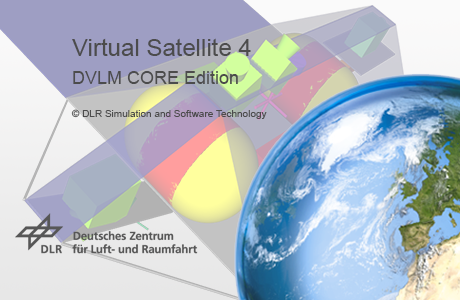
<style>
.page{position:relative;width:460px;height:300px}
.page>*{position:absolute;margin:0}
.t1{font:10px/12.5px "ArialMT";color:#4c4c4c}
.t2{font:24px/19.2px "ArialMT";color:#4c4c4c}
.t3{font:18px/19.2px "ArialMT";color:#4c4c4c}
</style>
<div class="page">
<p class="t1" style="left:71px;top:38px;width:196px;height:81px"><span class="t2">Virtual Satellite 4<br></span><span class="t3">DVLM CORE Edition<br></span><br>© DLR Simulation and Software Technology</p>
</div>
